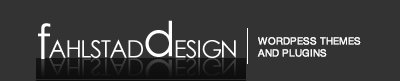
<style>
.page{position:relative;width:400px;height:81px;background:#333333}
.page>*{position:absolute;margin:0}
.t1{font:24px "STHeiti";letter-spacing:-0.05em;color:#ffffff}
.t2{font:48px "CenturyGothic";letter-spacing:-0.05em;color:#ffffff}
.t3{font:48px "STHeiti";letter-spacing:-0.05em;color:#ffffff}
.t4{font:10px "HelveticaNeue";color:#ffffff;font-weight:bold}
</style>
<div class="page">
<p class="t1" style="left:38px;top:20px;width:198px;height:39px"><span class="t2">f</span>AHLSTAD<span class="t3">d</span>ESIGN</p>
<p class="t4" style="left:257px;top:37px;width:104px;height:20px">WORDPESS THEMES<br>AND PLUGINS</p>
</div>
